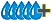
<style>
.page{position:relative;width:52px;height:21px;background:#ffffff}
.page>*{position:absolute;margin:0}
.t1{font:25px "Terminal";color:#4a4d59}
</style>
<div class="page">
<p class="t1" style="left:37px;top:4px;width:14px;height:13px">+</p>
</div>
